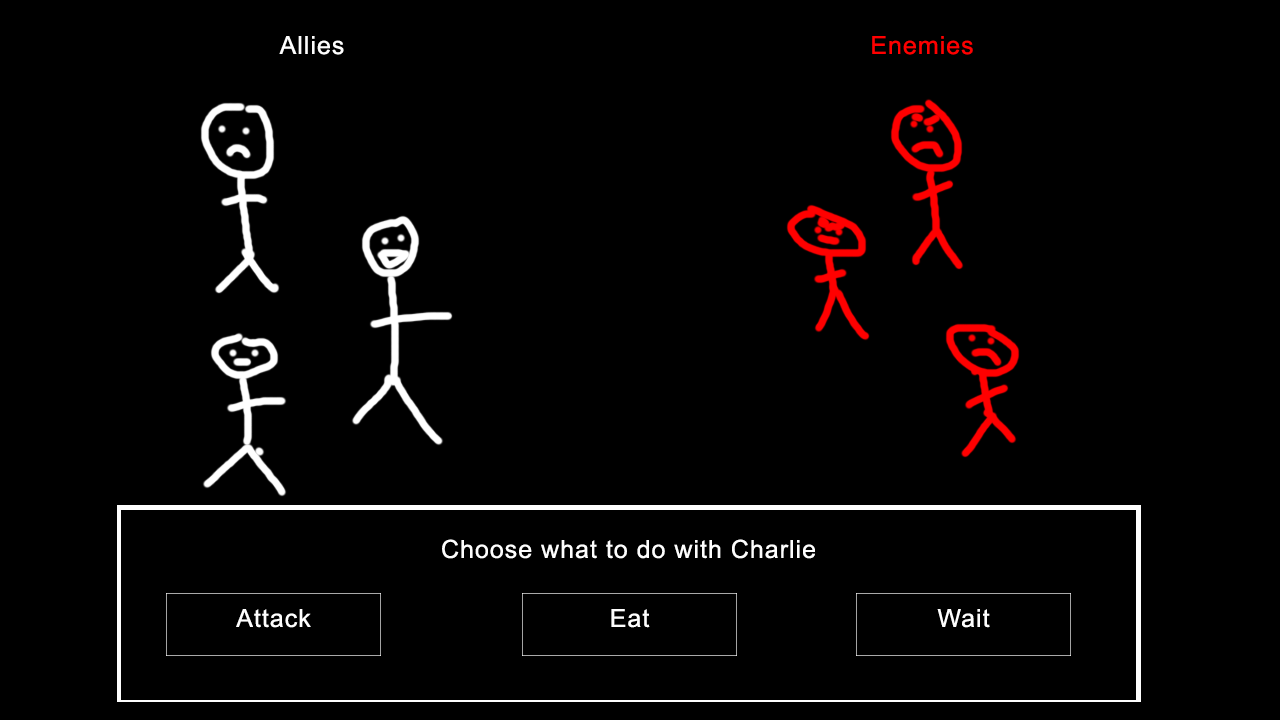
<style>
.page{position:relative;width:1280px;height:720px;background:#000000}
.page>*{position:absolute;margin:0}
.t1{font:25px "ArialMT";letter-spacing:0.04em;color:#fefefe}
.t2{font:25px "ArialMT";letter-spacing:0.04em;color:#ff0000}
</style>
<div class="page">
<p class="t1" style="left:279px;top:36px;width:65px;height:19px">Allies</p>
<p class="t2" style="left:872px;top:36px;width:101px;height:19px">Enemies</p>
<p class="t1" style="left:442px;top:539px;width:373px;height:20px">Choose what to do with Charlie</p>
<p class="t1" style="left:236px;top:609px;width:75px;height:19px">Attack</p>
<p class="t1" style="left:611px;top:609px;width:39px;height:19px">Eat</p>
<p class="t1" style="left:937px;top:609px;width:53px;height:19px">Wait</p>
</div>
